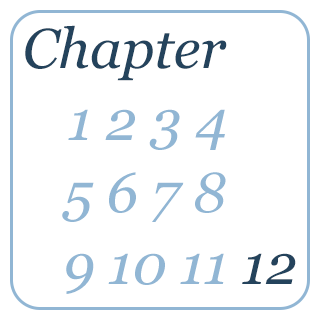
<style>
.page{position:relative;width:320px;height:320px;background:#ffffff}
.page>*{position:absolute;margin:0}
.t1{font:96px/72px "Georgia-Italic";color:#91b6d4}
.t2{font:96px/72px "Georgia-Italic";color:#24435c}
</style>
<div class="page">
<p class="t1" style="left:25px;top:25px;width:271px;height:269px"><span class="t2">Chapter<br>   </span>1 2 3 4<br>   5 6 7 8<br>   9 10 11 <span class="t2">12</span></p>
</div>
